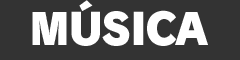
<style>
.page{position:relative;width:240px;height:60px;background:#333333}
.page>*{position:absolute;margin:0}
.t1{font:42.7px "RodinPro-UB";letter-spacing:-0.053em;color:#ffffff}
</style>
<div class="page">
<p class="t1" style="left:32px;top:0px;width:176px;height:46px">MÚSICA</p>
</div>
